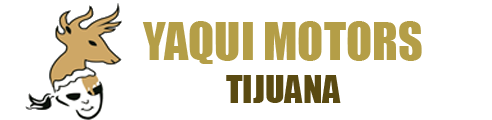
<style>
.page{position:relative;width:492px;height:120px;background:#ffffff}
.page>*{position:absolute;margin:0}
.t1{font:48px "Impact";color:#b49e47}
.t2{font:36px "Impact";color:#5a4a11}
</style>
<div class="page">
<p class="t1" style="left:142px;top:21px;width:280px;height:82px;text-align:center">YAQUI MOTORS<br><span class="t2">TIJUANA</span></p>
</div>
